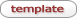
<style>
.page{position:relative;width:77px;height:18px;background:#ffffff}
.page>*{position:absolute;margin:0}
.t1{font:9px "Verdana";letter-spacing:-0.02em;color:#993333;font-weight:bold;scale:1.3 1}
</style>
<div class="page">
<p class="t1" style="left:11px;top:5px;width:53px;height:9px">template</p>
</div>
